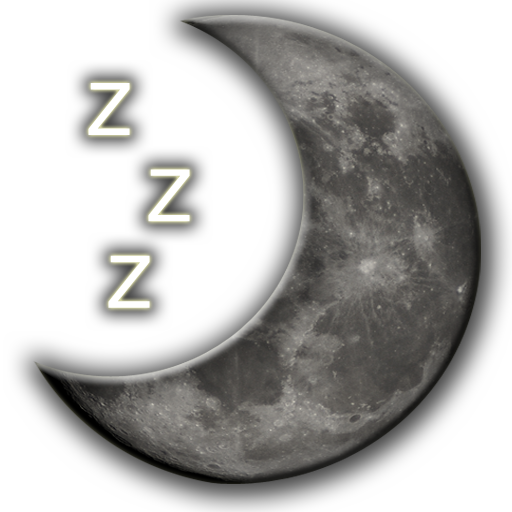
<style>
.page{position:relative;width:512px;height:512px;background:#ffffff}
.page>*{position:absolute;margin:0}
.t1{font:72px "Helvetica";color:#ffffff}
</style>
<div class="page">
<p class="t1" style="left:88px;top:83px;width:102px;height:225px">Z<br>    Z<br>  Z</p>
</div>
